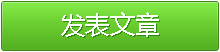
<style>
.page{position:relative;width:220px;height:52px}
.page>*{position:absolute;margin:0}
.t1{font:25px "MicrosoftYaHei";color:#ffffff}
</style>
<div class="page">
<p class="t1" style="left:61px;top:12px;width:98px;height:25px">发表文章</p>
</div>
